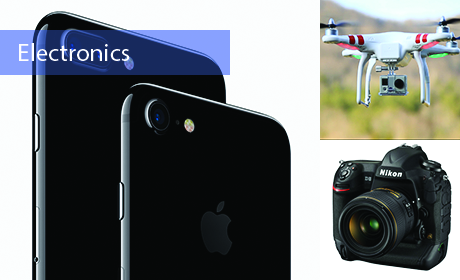
<style>
.page{position:relative;width:460px;height:280px;background:#060808}
.page>*{position:absolute;margin:0}
.t1{font:25px "MyriadPro-Regular";color:#fefeff}
</style>
<div class="page">
<p class="t1" style="left:19px;top:43px;width:111px;height:18px">Electronics</p>
</div>
